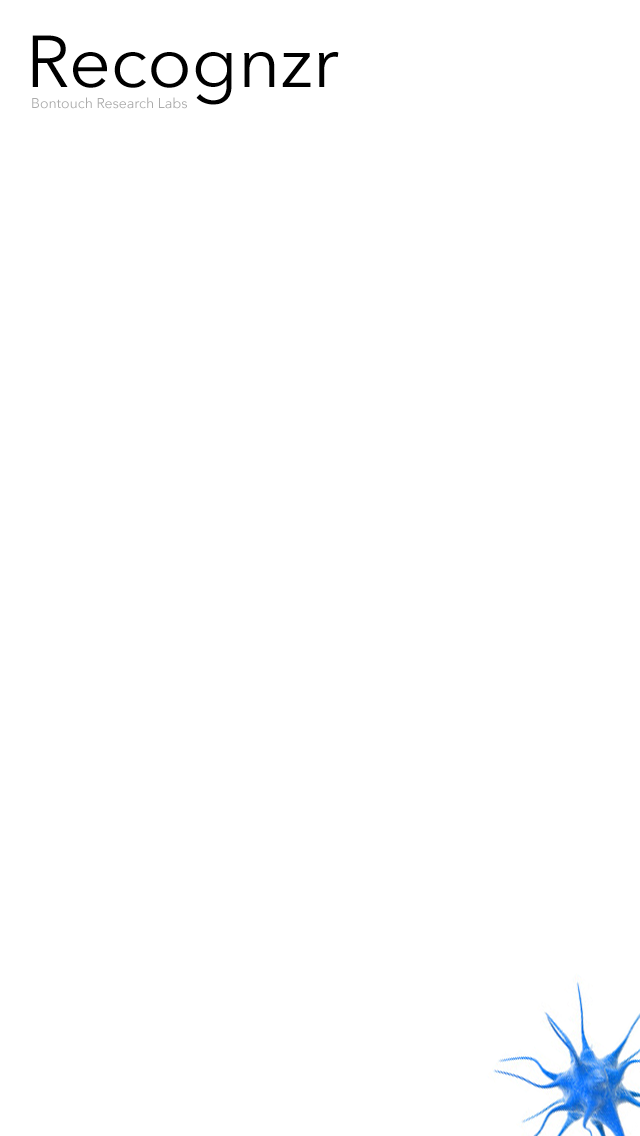
<style>
.page{position:relative;width:640px;height:1136px;background:#ffffff}
.page>*{position:absolute;margin:0}
.t1{font:72.7px "AvenirNext-Regular";color:#000000}
.t2{font:14px "AvenirNext-Regular";color:#ababab}
</style>
<div class="page">
<p class="t1" style="left:32px;top:35px;width:307px;height:70px">Recognzr</p>
<p class="t2" style="left:32px;top:97px;width:155px;height:12px">Bontouch Research Labs</p>
</div>
